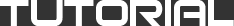
<style>
.page{position:relative;width:234px;height:26px;background:#333333}
.page>*{position:absolute;margin:0}
.t1{font:50px "Bitsumishi";color:#ffffff}
</style>
<div class="page">
<p class="t1" style="left:0px;top:0px;width:234px;height:26px">tutorial</p>
</div>
